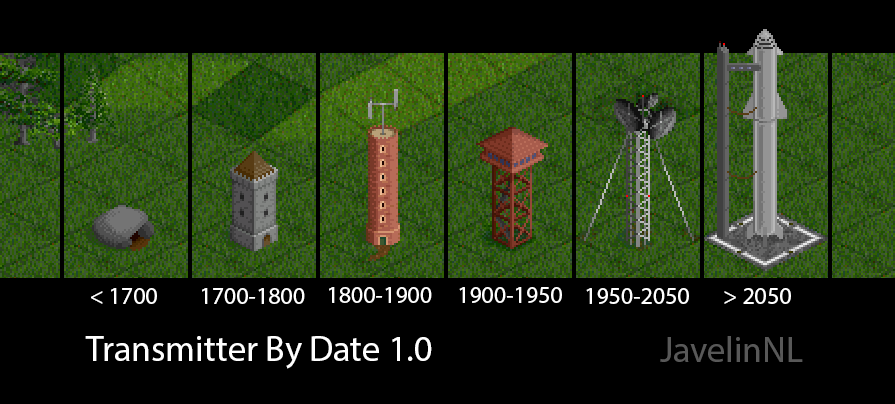
<style>
.page{position:relative;width:895px;height:404px;background:#000000}
.page>*{position:absolute;margin:0}
.t1{font:24px "MyriadPro-Regular";color:#ffffff}
.t2{font:36px "MyriadPro-Regular";color:#ffffff}
.t3{font:36px "MyriadPro-Regular";color:#585858}
</style>
<div class="page">
<p class="t1" style="left:91px;top:288px;width:66px;height:16px">&lt; 1700</p>
<p class="t1" style="left:202px;top:288px;width:103px;height:16px">1700-1800</p>
<p class="t1" style="left:329px;top:287px;width:103px;height:16px">1800-1900</p>
<p class="t1" style="left:459px;top:287px;width:103px;height:16px">1900-1950</p>
<p class="t1" style="left:586px;top:288px;width:103px;height:16px">1950-2050</p>
<p class="t1" style="left:724px;top:288px;width:67px;height:16px">&gt; 2050</p>
<p class="t2" style="left:85px;top:336px;width:347px;height:33px">Transmitter By Date 1.0</p>
<p class="t3" style="left:660px;top:336px;width:143px;height:26px">JavelinNL</p>
</div>
